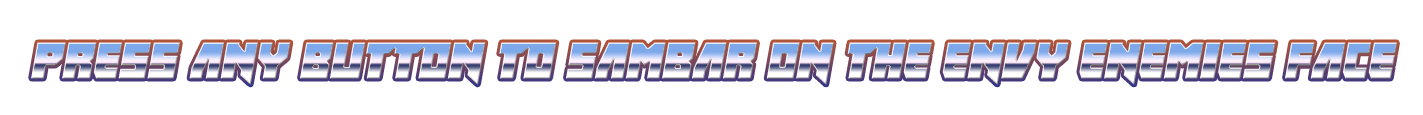
<style>
.page{position:relative;width:1423px;height:115px;background:#ffffff}
.page>*{position:absolute;margin:0}
.t1{font:50.8px "Ifinkufreeky";letter-spacing:0.01em;font-style:italic}
</style>
<div class="page">
<p class="t1" style="left:31px;top:42px;width:1366px;height:43px">Press any button to sambar on the envy enemies face</p>
</div>
